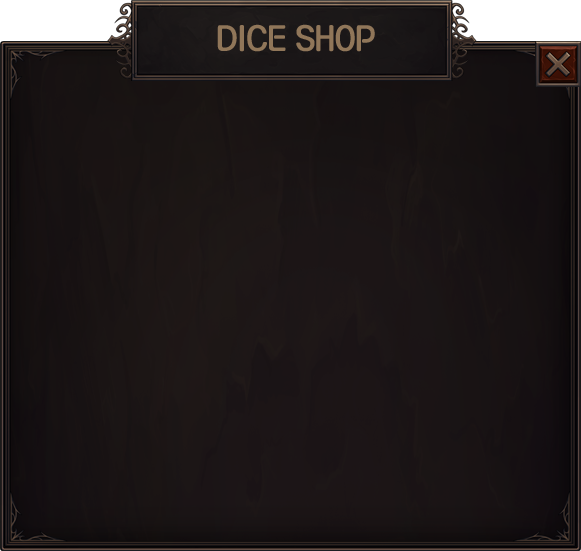
<style>
.page{position:relative;width:581px;height:551px}
.page>*{position:absolute;margin:0}
.t1{font:30px "KoreanNGL3-R";color:#907659}
</style>
<div class="page">
<p class="t1" style="left:217px;top:24px;width:158px;height:28px">DICE SHOP</p>
</div>
